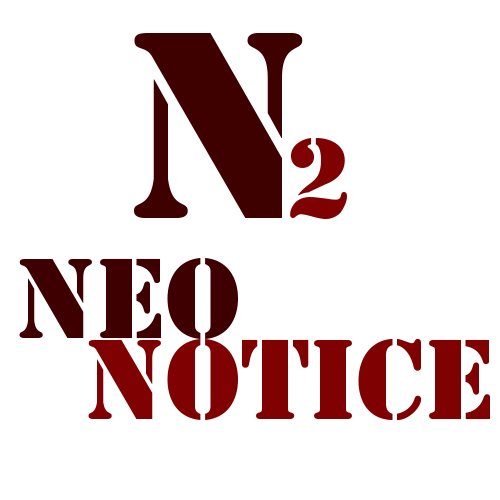
<style>
.page{position:relative;width:500px;height:500px;background:#ffffff}
.page>*{position:absolute;margin:0}
.t1{font:246.9px "StencilStd";color:#3f0000}
.t2{font:105.8px "StencilStd";color:#7f0101}
.t3{font:105.8px "StencilStd";color:#3e0000}
</style>
<div class="page">
<p class="t1" style="left:134px;top:33px;width:169px;height:185px">n</p>
<p class="t2" style="left:290px;top:138px;width:57px;height:81px">2</p>
<p class="t3" style="left:19px;top:258px;width:219px;height:81px">NEO</p>
<p class="t2" style="left:88px;top:338px;width:402px;height:83px">NOTICE</p>
</div>
